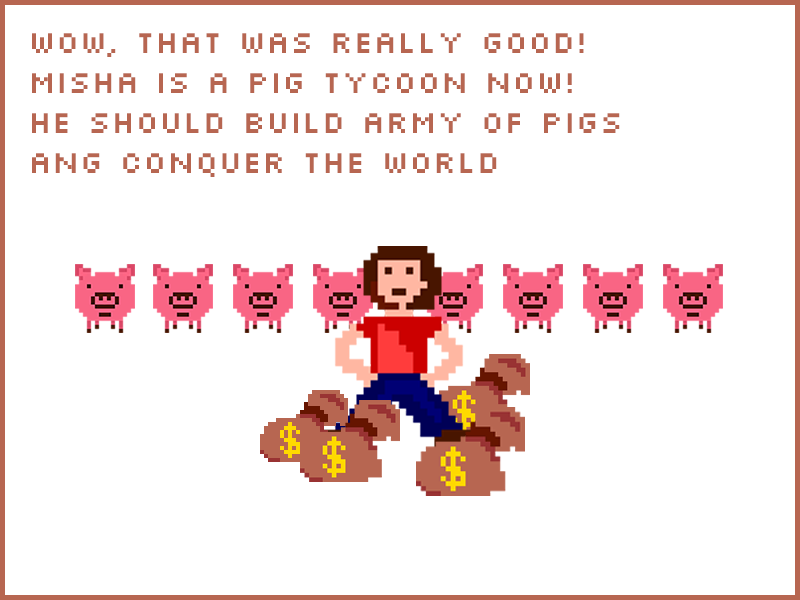
<style>
.page{position:relative;width:800px;height:600px;background:#ffffff}
.page>*{position:absolute;margin:0}
.t1{font:33.3px "Silkscreen";color:#b76651}
</style>
<div class="page">
<p class="t1" style="left:32px;top:33px;width:588px;height:144px">wow, that was really good!<br>Misha is a Pig tycoon now!<br>he should build army of pigs <br>ang conquer the world</p>
</div>
